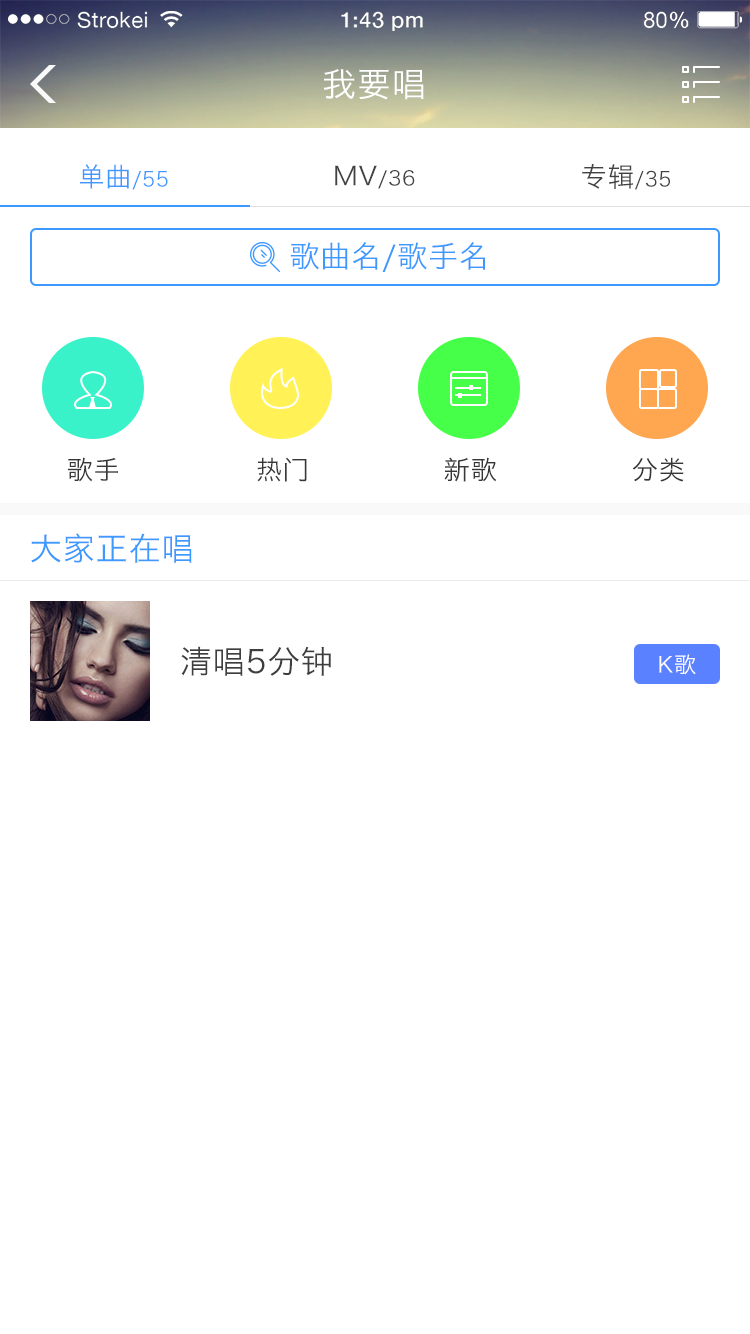
<style>
.page{position:relative;width:750px;height:1334px;background:#ffffff}
.page>*{position:absolute;margin:0}
.t1{font:33.9px "HiraginoSansGB-W3";letter-spacing:0.03em;color:#ffffff}
.t2{font:20.3px "HiraginoSansGB-W3";letter-spacing:0.03em;color:#3e99ff}
.t3{font:26.6px "HiraginoSansGB-W3";letter-spacing:0.03em;color:#3e99ff}
.t4{font:20px "HiraginoSansGB-W3";letter-spacing:0.03em;color:#424242}
.t5{font:25.7px "HiraginoSansGB-W3";letter-spacing:0.03em;color:#424242}
.t6{font:20.3px "HiraginoSansGB-W3";letter-spacing:0.03em;color:#424242}
.t7{font:26.6px "HiraginoSansGB-W3";letter-spacing:0.03em;color:#424242}
.t8{font:30px "HiraginoSansGB-W3";letter-spacing:0.03em;color:#3e99ff}
.t9{font:26px "HiraginoSansGB-W3";letter-spacing:0.03em;color:#373737}
.t10{font:32px "HiraginoSansGB-W3";letter-spacing:0.03em;color:#3e99ff}
.t11{font:32px "HiraginoSansGB-W3";letter-spacing:0.03em;color:#3d3d40}
.t12{font:22px "HiraginoSansGB-W3";letter-spacing:0.03em;color:#ffffff}
</style>
<div class="page">
<p class="t1" style="left:323px;top:69px;width:101px;height:31px">我要唱</p>
<p class="t2" style="left:80px;top:164px;width:88px;height:26px"><span class="t3">单曲</span>/55</p>
<p class="t4" style="left:335px;top:165px;width:80px;height:24px"><span class="t5">MV</span>/36</p>
<p class="t6" style="left:582px;top:164px;width:88px;height:26px"><span class="t7">专辑</span>/35</p>
<p class="t8" style="left:290px;top:242px;width:196px;height:30px">歌曲名/歌手名</p>
<p class="t9" style="left:68px;top:457px;width:50px;height:25px">歌手</p>
<p class="t9" style="left:257px;top:457px;width:50px;height:25px">热门</p>
<p class="t9" style="left:444px;top:457px;width:53px;height:25px">新歌</p>
<p class="t9" style="left:632px;top:457px;width:52px;height:25px">分类</p>
<p class="t10" style="left:31px;top:533px;width:161px;height:30px">大家正在唱</p>
<p class="t11" style="left:181px;top:646px;width:150px;height:30px">清唱5分钟</p>
<p class="t12" style="left:659px;top:654px;width:37px;height:21px">K歌</p>
</div>
